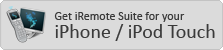
<style>
.page{position:relative;width:223px;height:50px;background:#dbdbdb}
.page>*{position:absolute;margin:0}
.t1{font:12px "Calibri";color:#3a3a3a}
.t2{font:20px "Calibri";color:#3a3a3a}
</style>
<div class="page">
<p class="t1" style="left:54px;top:12px;width:131px;height:10px">Get iRemote Suite for your</p>
<p class="t2" style="left:55px;top:24px;width:160px;height:17px">iPhone / iPod Touch</p>
</div>
